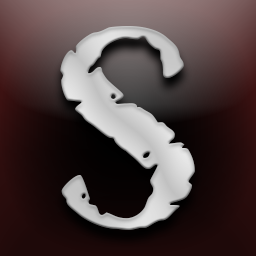
<style>
.page{position:relative;width:256px;height:256px}
.page>*{position:absolute;margin:0}
.t1{font:250px "Nelson-Bold";color:#c9c9c9}
</style>
<div class="page">
<p class="t1" style="left:60px;top:26px;width:135px;height:204px">S</p>
</div>
